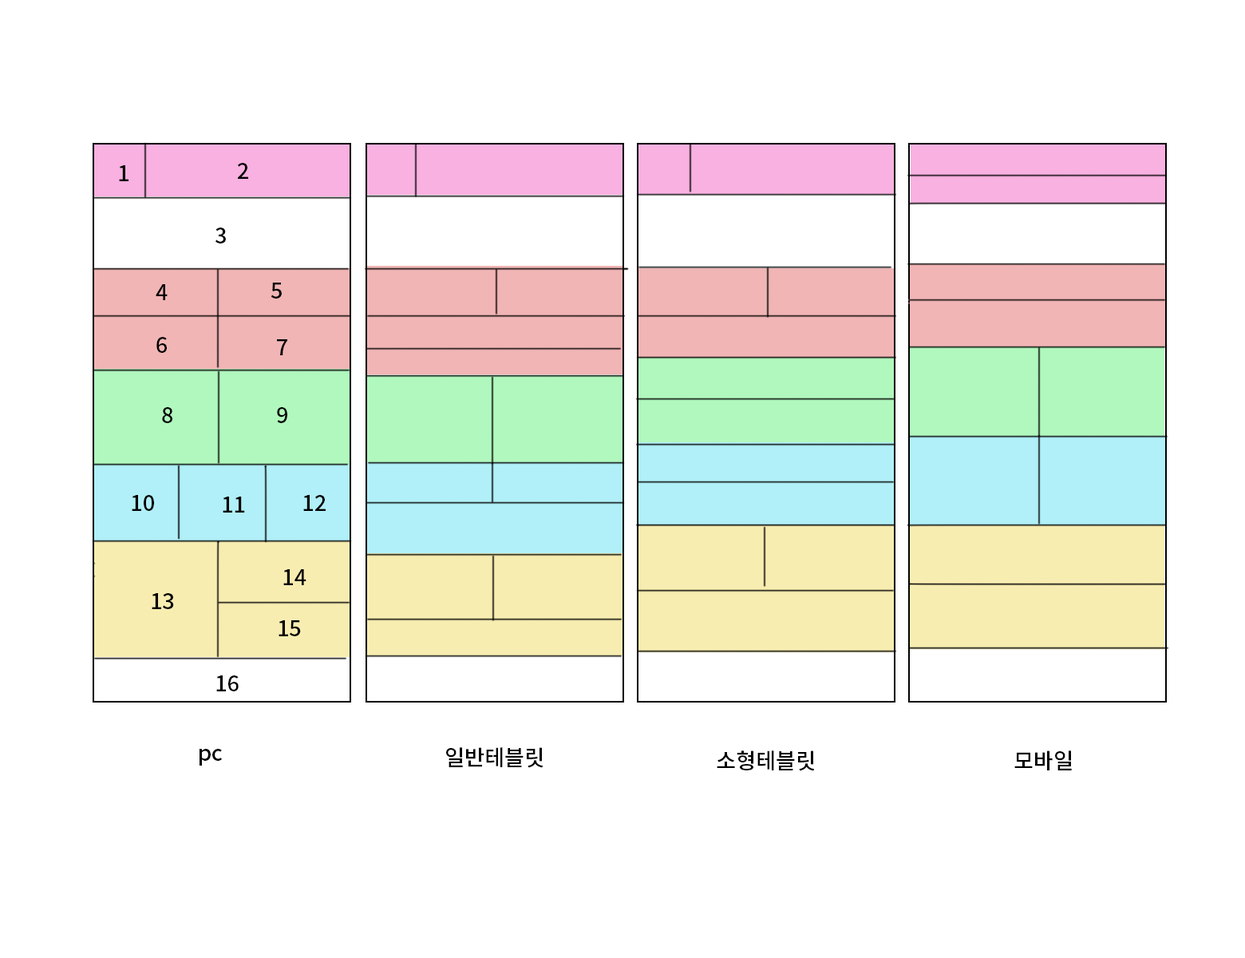
<style>
.page{position:relative;width:1245px;height:958px;background:#ffffff}
.page>*{position:absolute;margin:0}
.t1{font:21.7px "NotoSansKR-Medium";color:#000000}
</style>
<div class="page">
<p class="t1" style="left:119px;top:165px;width:9px;height:16px">1</p>
<p class="t1" style="left:238px;top:163px;width:10px;height:16px">2</p>
<p class="t1" style="left:215px;top:227px;width:11px;height:16px">3</p>
<p class="t1" style="left:156px;top:284px;width:12px;height:16px">4</p>
<p class="t1" style="left:271px;top:283px;width:11px;height:15px">5</p>
<p class="t1" style="left:156px;top:337px;width:11px;height:16px">6</p>
<p class="t1" style="left:277px;top:339px;width:10px;height:16px">7</p>
<p class="t1" style="left:162px;top:407px;width:10px;height:16px">8</p>
<p class="t1" style="left:277px;top:407px;width:10px;height:16px">9</p>
<p class="t1" style="left:132px;top:495px;width:22px;height:16px">10</p>
<p class="t1" style="left:223px;top:496px;width:22px;height:16px">11</p>
<p class="t1" style="left:303px;top:495px;width:23px;height:16px">12</p>
<p class="t1" style="left:283px;top:569px;width:23px;height:16px">14</p>
<p class="t1" style="left:152px;top:593px;width:22px;height:16px">13</p>
<p class="t1" style="left:279px;top:620px;width:22px;height:16px">15</p>
<p class="t1" style="left:216px;top:675px;width:23px;height:16px">16</p>
<p class="t1" style="left:200px;top:749px;width:22px;height:16px">pc</p>
<p class="t1" style="left:446px;top:747px;width:98px;height:21px">일반테블릿</p>
<p class="t1" style="left:717px;top:750px;width:98px;height:21px">소형테블릿</p>
<p class="t1" style="left:1014px;top:750px;width:58px;height:20px">모바일</p>
</div>
